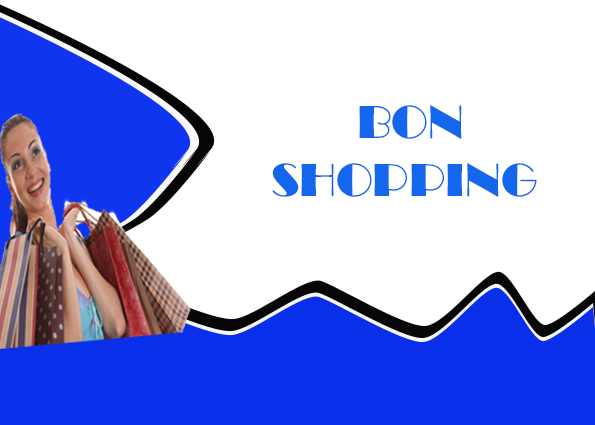
<style>
.page{position:relative;width:595px;height:425px;background:#ffffff}
.page>*{position:absolute;margin:0}
.t1{font:48px "Broadway";color:#1466ec}
</style>
<div class="page">
<p class="t1" style="left:272px;top:104px;width:265px;height:94px;text-align:center">BON<br>SHOPPING</p>
</div>
